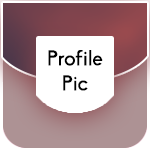
<style>
.page{position:relative;width:150px;height:150px;background:#ffffff}
.page>*{position:absolute;margin:0}
.t1{font:20.8px "Biko";color:#000000}
</style>
<div class="page">
<p class="t1" style="left:48px;top:50px;width:55px;height:41px;text-align:center">Profile Pic</p>
</div>
